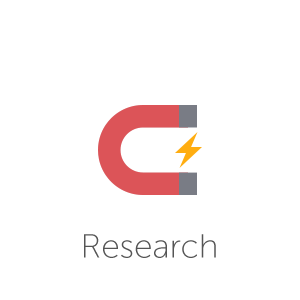
<style>
.page{position:relative;width:300px;height:300px;background:#ffffff}
.page>*{position:absolute;margin:0}
.t1{font:33.3px "MuseoSans-100";color:#555555}
</style>
<div class="page">
<p class="t1" style="left:84px;top:234px;width:132px;height:24px">Research</p>
</div>
